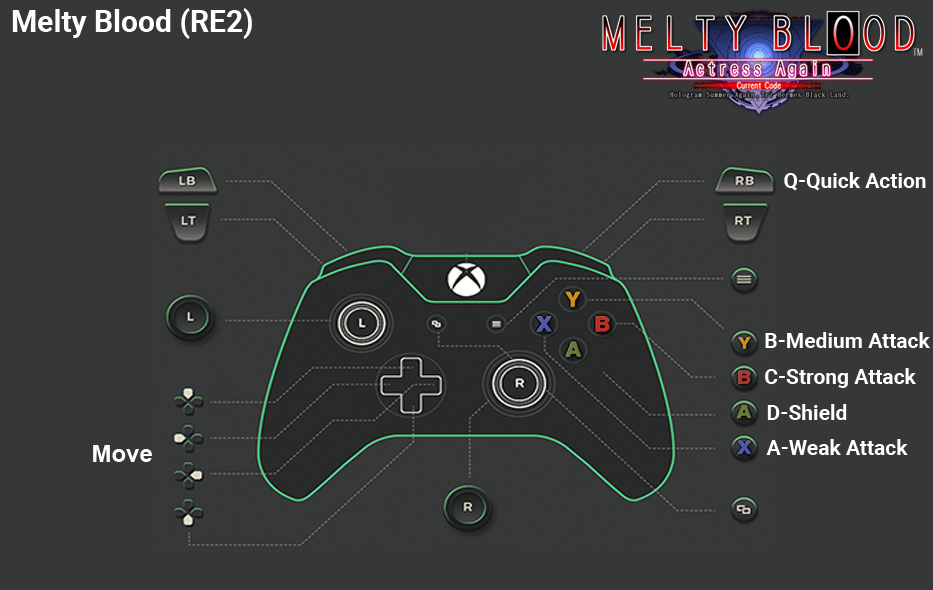
<style>
.page{position:relative;width:933px;height:590px;background:#363838}
.page>*{position:absolute;margin:0}
.t1{font:30px "Roboto-Bold";color:#ffffff}
.t2{font:21px "Roboto-Bold";color:#ffffff}
.t3{font:24px "Arial-BoldMT";color:#fefefe}
</style>
<div class="page">
<p class="t1" style="left:12px;top:8px;width:240px;height:31px">Melty Blood (RE2)</p>
<p class="t2" style="left:784px;top:172px;width:142px;height:19px">Q-Quick Action</p>
<p class="t2" style="left:765px;top:332px;width:165px;height:16px">B-Medium Attack</p>
<p class="t2" style="left:765px;top:368px;width:151px;height:20px">C-Strong Attack</p>
<p class="t2" style="left:767px;top:404px;width:80px;height:16px">D-Shield</p>
<p class="t3" style="left:93px;top:445px;width:59px;height:17px">Move</p>
<p class="t2" style="left:766px;top:439px;width:142px;height:16px">A-Weak Attack</p>
</div>
